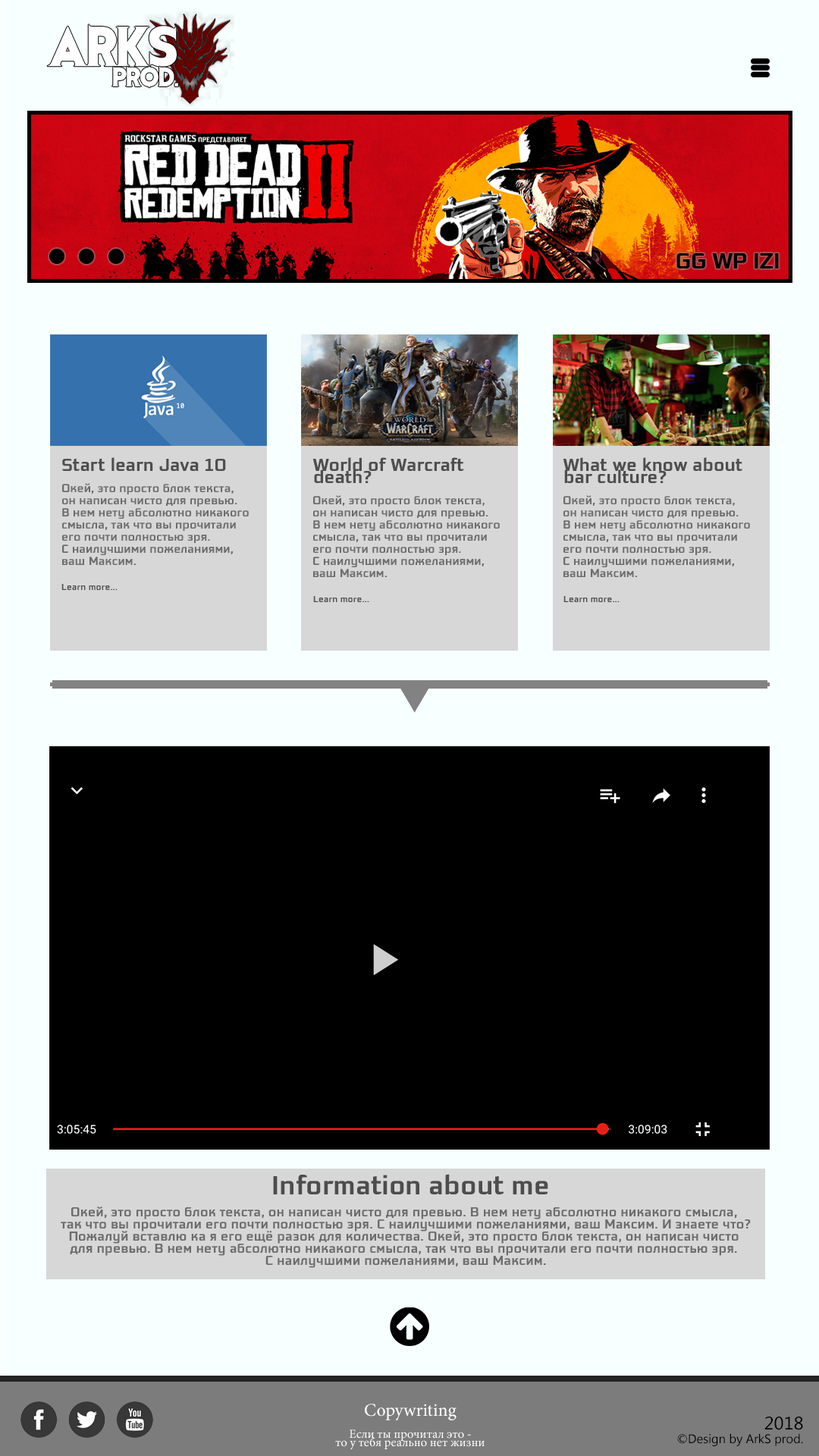
<style>
.page{position:relative;width:819px;height:1456px;background:#f7ffff}
.page>*{position:absolute;margin:0}
.t1{font:22.7px "EagleSans-Bold";color:#000000}
.t2{font:18.2px "EagleSans-Bold";color:#4e4e4e}
.t3{font:18.2px/12.1px "EagleSans-Bold";color:#4e4e4e}
.t4{font:12.1px/12.1px "EagleSans-Bold";color:#6c6c6c}
.t5{font:9.1px "EagleSans-Bold";color:#4d4d4d}
.t6{font:27.3px "EagleSans-Bold";color:#4d4d4d}
.t7{font:13.6px/12.1px "EagleSans-Bold";color:#6c6c6c}
.t8{font:18.2px "MinionPro-Regular";color:#ffffff}
.t9{font:18.2px "MicrosoftTaiLe";color:#000000}
.t10{font:12.4px/8.2px "MinionPro-Regular";color:#ffffff}
.t11{font:12.4px "MicrosoftTaiLe";color:#000000}
</style>
<div class="page">
<p class="t1" style="left:676px;top:253px;width:103px;height:15px">GG WP IZI</p>
<p class="t2" style="left:62px;top:457px;width:164px;height:14px">Start learn Java 10</p>
<p class="t3" style="left:312px;top:457px;width:152px;height:26px">World of Warcraft <br>death?</p>
<p class="t3" style="left:563px;top:457px;width:179px;height:26px">What we know about <br>bar culture?</p>
<p class="t4" style="left:62px;top:483px;width:187px;height:82px">Окей, это просто блок текста, <br>он написан чисто для превью.<br>В нем нету абсолютно никакого <br>смысла, так что вы прочитали<br>его почти полностью зря. <br>С наилучшими пожеланиями, <br>ваш Максим.</p>
<p class="t4" style="left:313px;top:495px;width:187px;height:82px">Окей, это просто блок текста, <br>он написан чисто для превью.<br>В нем нету абсолютно никакого <br>смысла, так что вы прочитали<br>его почти полностью зря. <br>С наилучшими пожеланиями, <br>ваш Максим.</p>
<p class="t4" style="left:563px;top:495px;width:187px;height:82px">Окей, это просто блок текста, <br>он написан чисто для превью.<br>В нем нету абсолютно никакого <br>смысла, так что вы прочитали<br>его почти полностью зря. <br>С наилучшими пожеланиями, <br>ваш Максим.</p>
<p class="t5" style="left:61px;top:584px;width:57px;height:6px">Learn more...</p>
<p class="t5" style="left:313px;top:596px;width:56px;height:6px">Learn more...</p>
<p class="t5" style="left:563px;top:596px;width:57px;height:6px">Learn more...</p>
<p class="t6" style="left:273px;top:1174px;width:275px;height:20px">Information about me</p>
<p class="t7" style="left:61px;top:1206px;width:690px;height:62px;text-align:center">Окей, это просто блок текста, он написан чисто для превью. В нем нету абсолютно никакого смысла, <br>так что вы прочитали его почти полностью зря. С наилучшими пожеланиями, ваш Максим. И знаете что?<br>Пожалуй вставлю ка я его ещё разок для количества. Окей, это просто блок текста, он написан чисто <br>для превью. В нем нету абсолютно никакого смысла, так что вы прочитали его почти полностью зря. <br>С наилучшими пожеланиями, ваш Максим.</p>
<p class="t8" style="left:365px;top:1404px;width:92px;height:16px">Copywriting</p>
<p class="t9" style="left:764px;top:1417px;width:39px;height:13px">2018</p>
<p class="t10" style="left:335px;top:1429px;width:150px;height:21px;text-align:center">Если ты прочитал это -<br>то у тебя реально нет жизни</p>
<p class="t11" style="left:677px;top:1433px;width:126px;height:13px">©Design by ArkS prod.</p>
</div>
